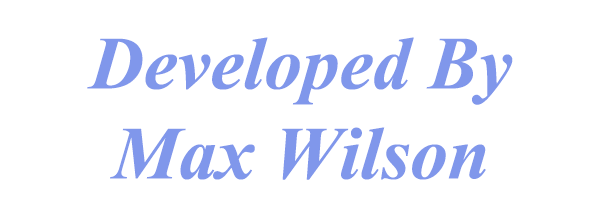
<style>
.page{position:relative;width:600px;height:210px;background:#ffffff}
.page>*{position:absolute;margin:0}
.t1{font:75px "MaestroTimes-BoldItalic";color:#8097eb}
</style>
<div class="page">
<p class="t1" style="left:87px;top:37px;width:426px;height:143px;text-align:center">Developed By<br>Max Wilson</p>
</div>
